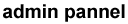
<style>
.page{position:relative;width:128px;height:24px;background:#ffffff}
.page>*{position:absolute;margin:0}
.t1{font:19.1px "Arial-BoldMT";color:#000000}
</style>
<div class="page">
<p class="t1" style="left:3px;top:4px;width:122px;height:18px">admin pannel</p>
</div>
